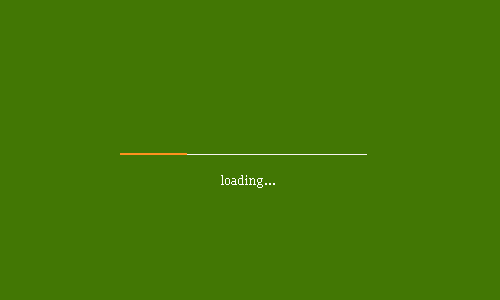
<style>
.page{position:relative;width:500px;height:300px;background:#427704}
.page>*{position:absolute;margin:0}
.t1{font:12px "Georgia";color:#fefefe}
</style>
<div class="page">
<p class="t1" style="left:221px;top:175px;width:54px;height:13px">loading...</p>
</div>
